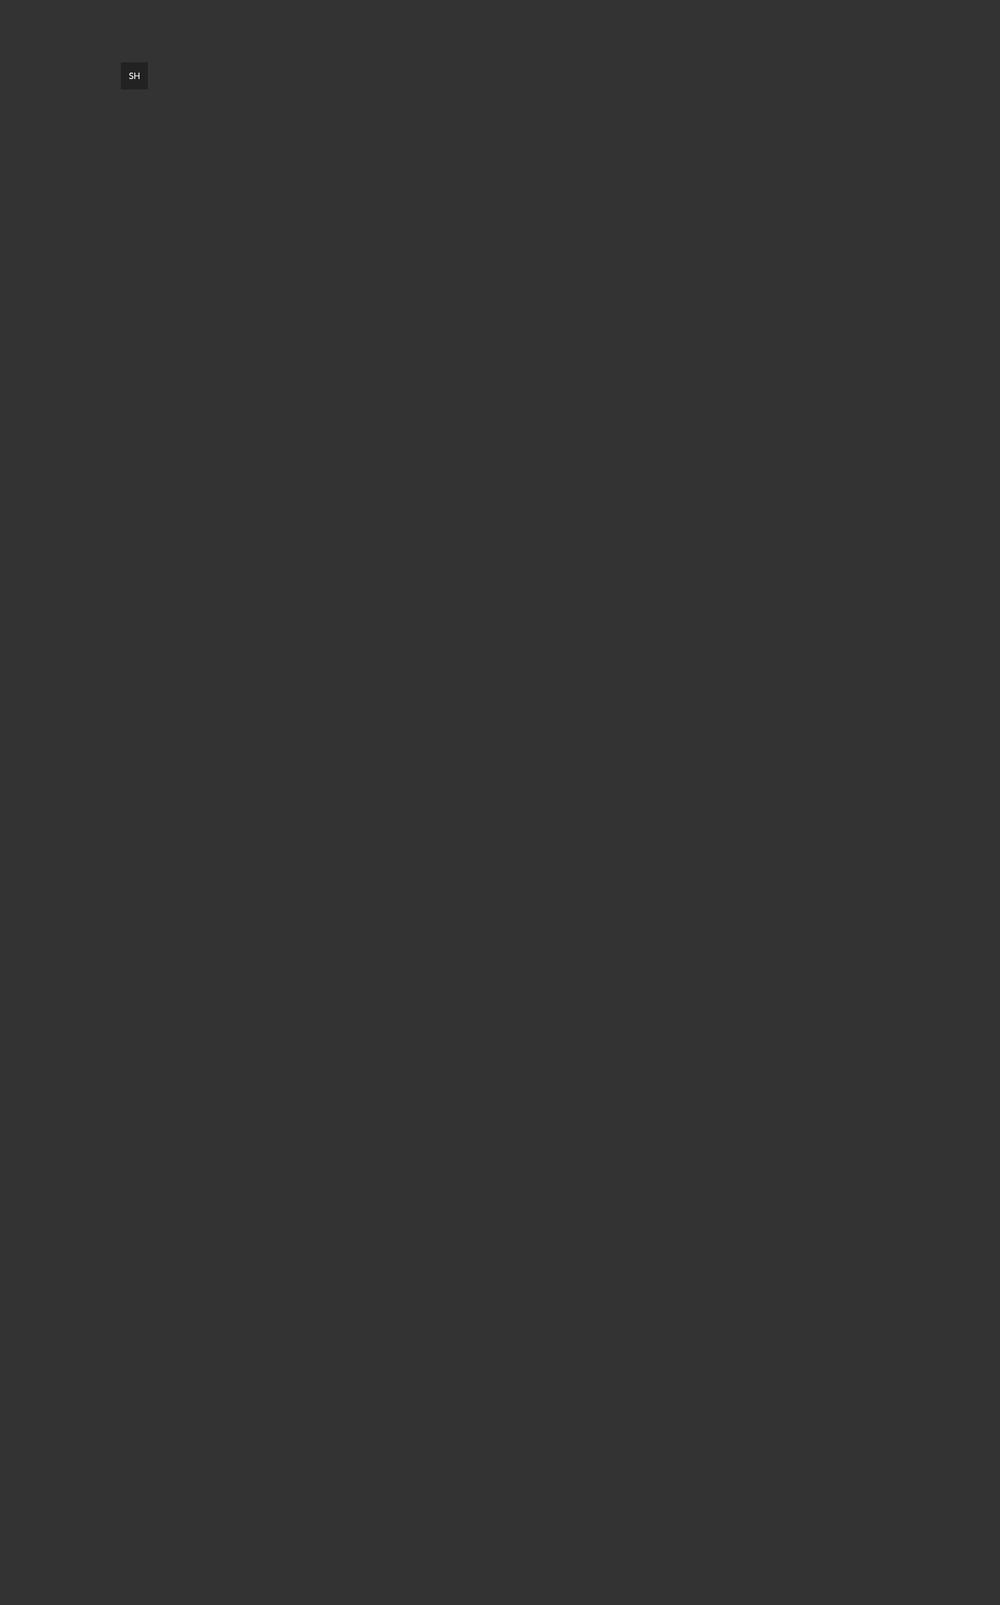
<style>
.page{position:relative;width:1000px;height:1605px;background:#333333}
.page>*{position:absolute;margin:0}
.t1{font:9px "Lato-Regular";color:#ffffff;text-transform:uppercase}
</style>
<div class="page">
<p class="t1" style="left:129px;top:73px;width:11px;height:6px">sh</p>
</div>
